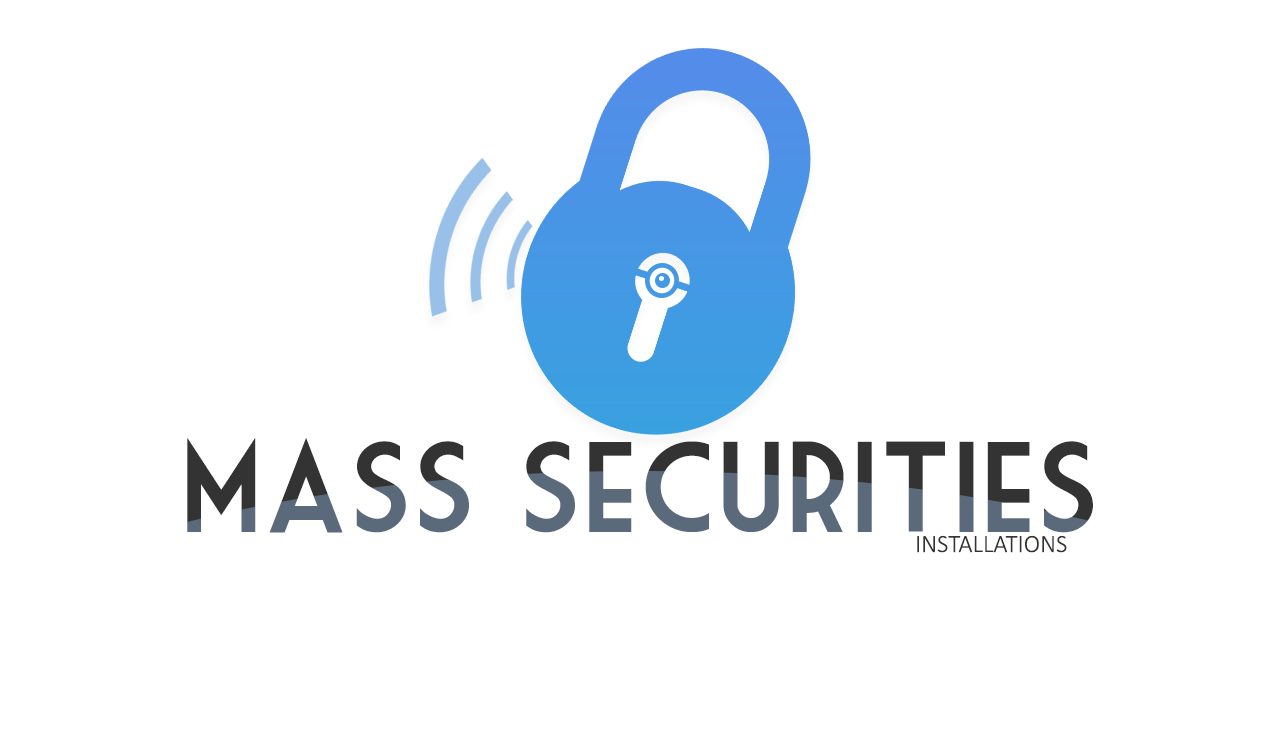
<style>
.page{position:relative;width:1280px;height:750px;background:#ffffff}
.page>*{position:absolute;margin:0}
.t1{font:125px "MarketDeco"}
.t2{font:25px "Calibri-Light";color:#333333}
</style>
<div class="page">
<p class="t1" style="left:187px;top:438px;width:906px;height:95px">mass securities</p>
<p class="t2" style="left:917px;top:535px;width:150px;height:18px">INSTALLATIONS</p>
</div>
